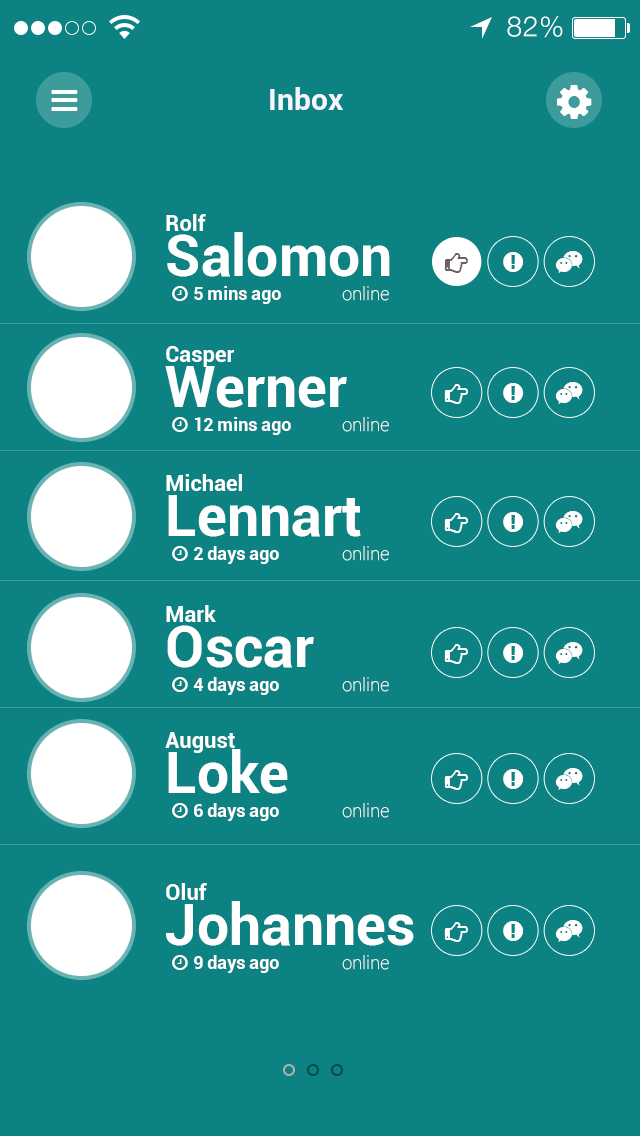
<style>
.page{position:relative;width:640px;height:1136px;background:#0d8282}
.page>*{position:absolute;margin:0}
.t1{font:28px "HelveticaNeue-Light";letter-spacing:0.025em;color:#ffffff}
.t2{font:30px "Roboto-Bold";color:#f4f5ff}
.t3{font:57px/45px "Roboto-Bold";color:#ffffff}
.t4{font:22px/45px "Roboto-Bold";color:#ffffff}
.t5{font:18px "Roboto-Bold";color:#ffffff}
.t6{font:18px "Roboto-Thin";color:#ffffff}
</style>
<div class="page">
<p class="t1" style="left:507px;top:16px;width:56px;height:22px">82%</p>
<p class="t2" style="left:270px;top:87px;width:73px;height:23px">Inbox</p>
<p class="t3" style="left:166px;top:214px;width:224px;height:63px"><span class="t4">Rolf<br></span>Salomon</p>
<p class="t5" style="left:194px;top:286px;width:87px;height:18px">5 mins ago</p>
<p class="t6" style="left:342px;top:286px;width:47px;height:15px">online</p>
<p class="t4" style="left:165px;top:346px;width:182px;height:62px">Casper<br><span class="t3">Werner</span></p>
<p class="t5" style="left:195px;top:417px;width:96px;height:18px">12 mins ago</p>
<p class="t6" style="left:342px;top:417px;width:47px;height:15px">online</p>
<p class="t4" style="left:166px;top:474px;width:195px;height:63px">Michael<br><span class="t3">Lennart</span></p>
<p class="t5" style="left:194px;top:546px;width:85px;height:18px">2 days ago</p>
<p class="t6" style="left:342px;top:546px;width:47px;height:15px">online</p>
<p class="t3" style="left:166px;top:605px;width:148px;height:63px"><span class="t4">Mark<br></span>Oscar</p>
<p class="t5" style="left:193px;top:677px;width:86px;height:18px">4 days ago</p>
<p class="t6" style="left:342px;top:677px;width:47px;height:15px">online</p>
<p class="t4" style="left:165px;top:732px;width:123px;height:62px">August<br><span class="t3">Loke</span></p>
<p class="t5" style="left:194px;top:803px;width:85px;height:18px">6 days ago</p>
<p class="t6" style="left:342px;top:803px;width:47px;height:15px">online</p>
<p class="t3" style="left:166px;top:883px;width:248px;height:63px"><span class="t4">Oluf<br></span>Johannes</p>
<p class="t5" style="left:194px;top:955px;width:85px;height:18px">9 days ago</p>
<p class="t6" style="left:342px;top:955px;width:47px;height:15px">online</p>
</div>
